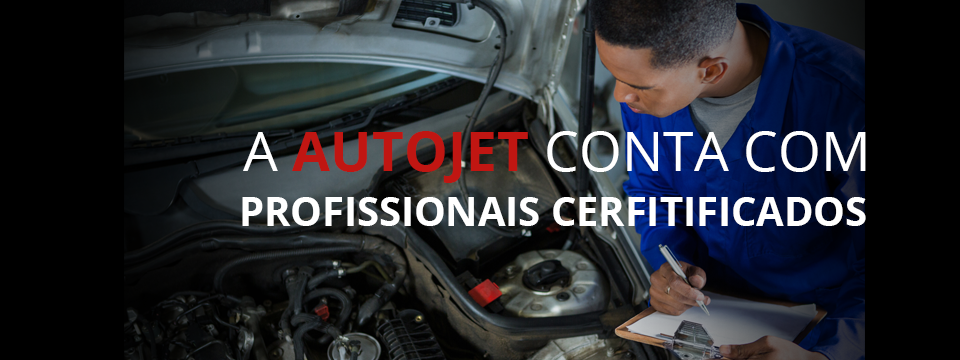
<style>
.page{position:relative;width:960px;height:360px;background:#000000}
.page>*{position:absolute;margin:0}
.t1{font:55.3px "OpenSans";color:#ffffff}
.t2{font:55.3px "OpenSans-Bold";color:#c01612}
.t3{font:39.8px "OpenSans-Bold";color:#ffffff}
</style>
<div class="page">
<p class="t1" style="left:243px;top:131px;width:623px;height:52px">A <span class="t2">AUTOJET</span> CONTA COM</p>
<p class="t3" style="left:242px;top:197px;width:624px;height:29px">PROFISSIONAIS CERFITIFICADOS</p>
</div>
